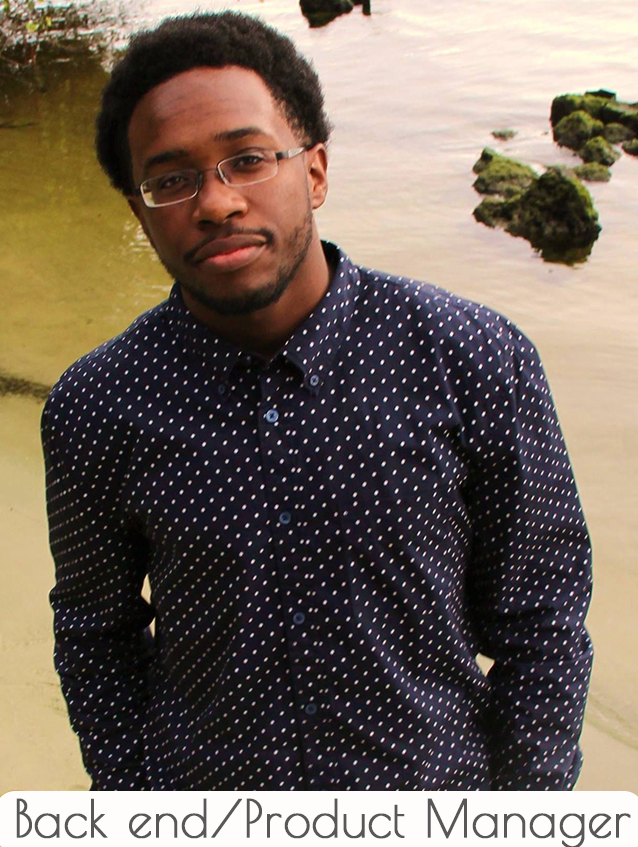
<style>
.page{position:relative;width:638px;height:847px}
.page>*{position:absolute;margin:0}
.t1{font:51.2px "PoiretOne-Regular";letter-spacing:0.005em;color:#575757;font-weight:bold;scale:0.96 1}
</style>
<div class="page">
<p class="t1" style="left:16px;top:798px;width:615px;height:51px">Back end/Product Manager</p>
</div>
